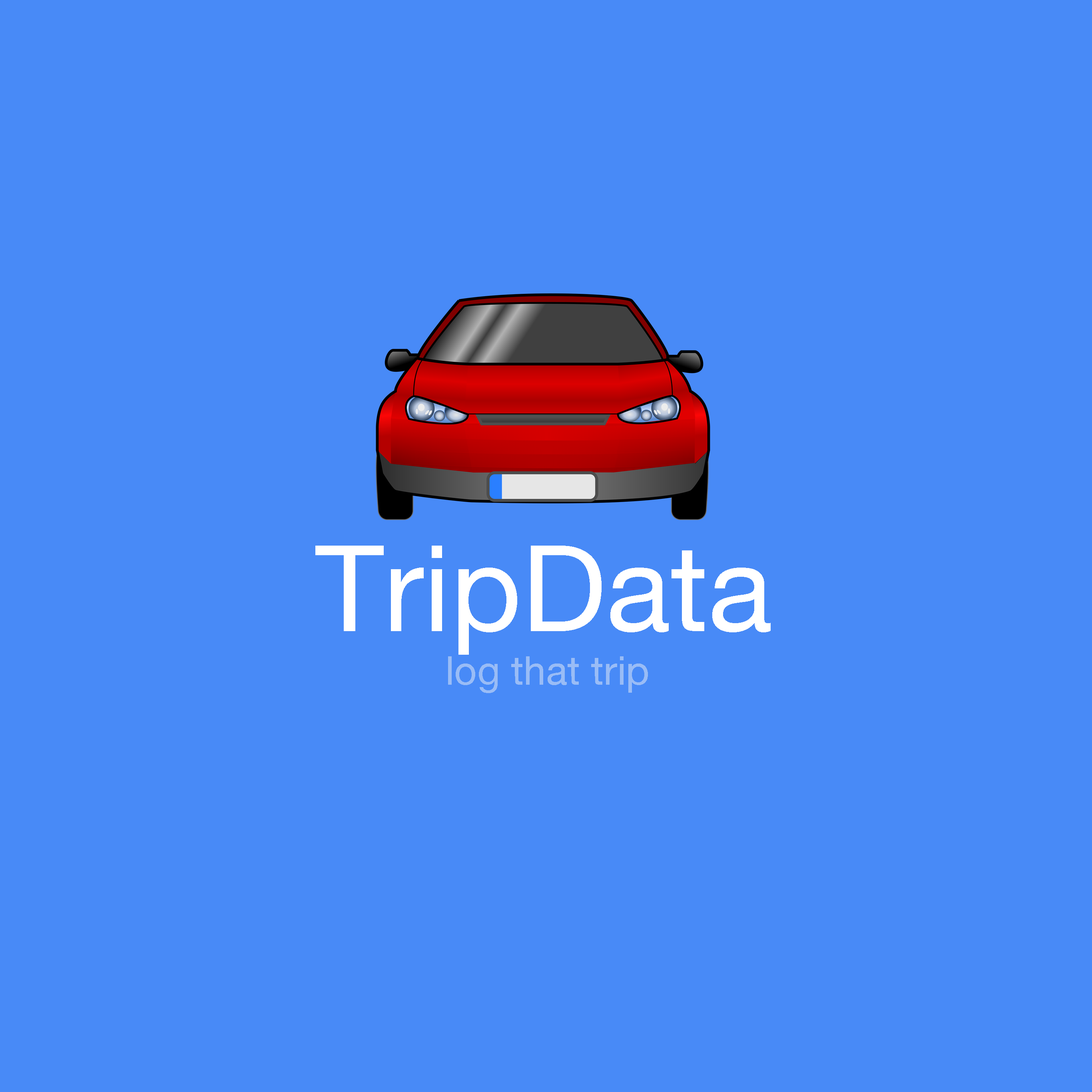
<style>
.page{position:relative;width:1092px;height:1092px;background:#488af7}
.page>*{position:absolute;margin:0}
.t1{font:119.9px "HelveticaNeue";color:#ffffff}
.t2{font:40px "HelveticaNeue";color:#99bcf6}
</style>
<div class="page">
<p class="t1" style="left:315px;top:546px;width:456px;height:109px">TripData</p>
<p class="t2" style="left:448px;top:656px;width:200px;height:37px">log that trip</p>
</div>
